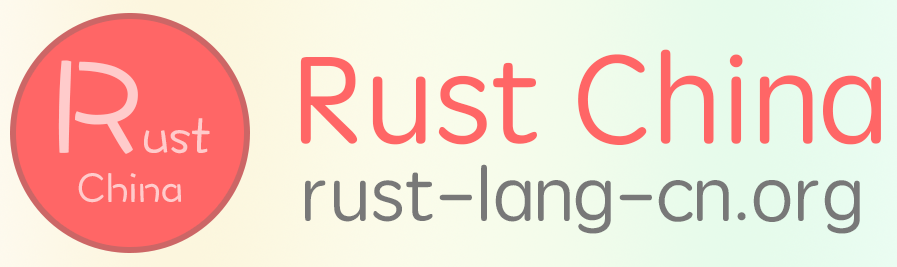
<style>
.page{position:relative;width:897px;height:267px;background:#ff6666}
.page>*{position:absolute;margin:0}
.t1{font:125px "STYuanti-SC-Regular";color:#ff6666}
.t2{font:54px "DFWaWaSC-W5";color:#ffcbcb}
.t3{font:138px "DFWaWaSC-W5";color:#ffcbcb}
.t4{font:43.2px "DFWaWaSC-W5";color:#ffcbcb}
.t5{font:75px "STYuanti-SC-Regular";color:#787878}
</style>
<div class="page">
<p class="t1" style="left:300px;top:49px;width:581px;height:96px">Rust China</p>
<p class="t2" style="left:58px;top:60px;width:152px;height:94px"><span class="t3">R</span>ust</p>
<p class="t4" style="left:78px;top:173px;width:103px;height:30px">China</p>
<p class="t5" style="left:305px;top:164px;width:555px;height:70px">rust-lang-cn.org</p>
</div>
